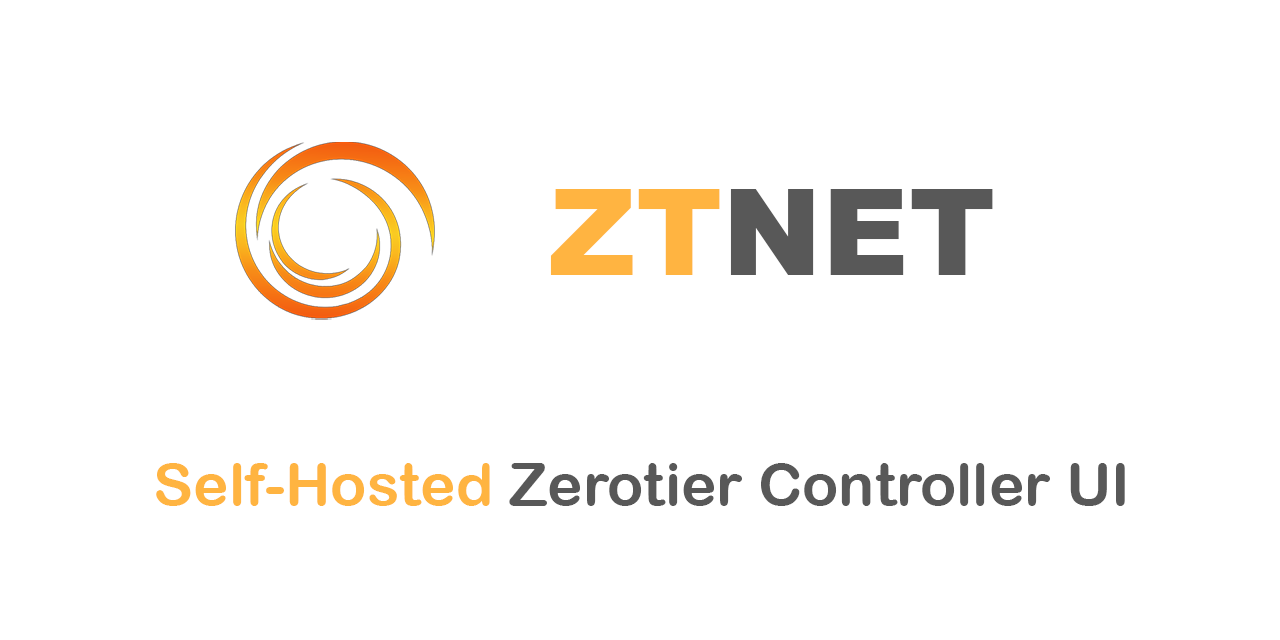
<style>
.page{position:relative;width:1280px;height:640px;background:#ffffff}
.page>*{position:absolute;margin:0}
.t1{font:120px "Arial-Black";color:#585858}
.t2{font:120px "Arial-Black";color:#ffb441}
.t3{font:60px "ArialRoundedMTBold";color:#585858}
.t4{font:60px "ArialRoundedMTBold";color:#ffb441}
</style>
<div class="page">
<p class="t1" style="left:550px;top:189px;width:443px;height:86px"><span class="t2">ZT</span>NET</p>
<p class="t3" style="left:156px;top:463px;width:969px;height:43px"><span class="t4">Self-Hosted</span> Zerotier Controller UI</p>
</div>
